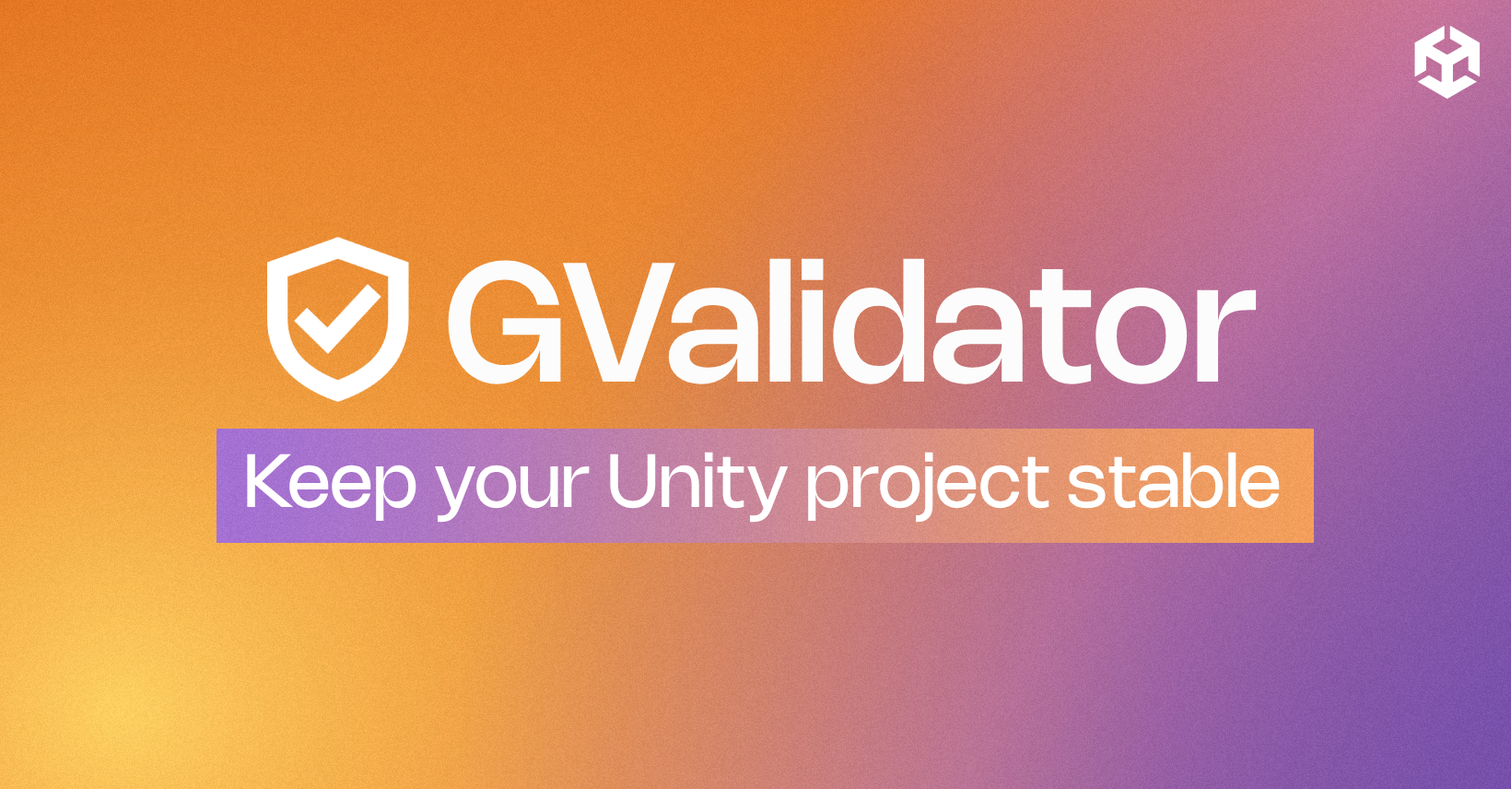
<style>
.page{position:relative;width:1511px;height:789px}
.page>*{position:absolute;margin:0}
.t1{font:165.9px "Nohemi-Medium";color:#fcfcfc}
.t2{font:73.7px "Nohemi-Regular";color:#ffffff}
</style>
<div class="page">
<p class="t1" style="left:448px;top:258px;width:809px;height:126px">GValidator</p>
<p class="t2" style="left:247px;top:452px;width:1033px;height:71px">Keep your Unity project stable</p>
</div>
